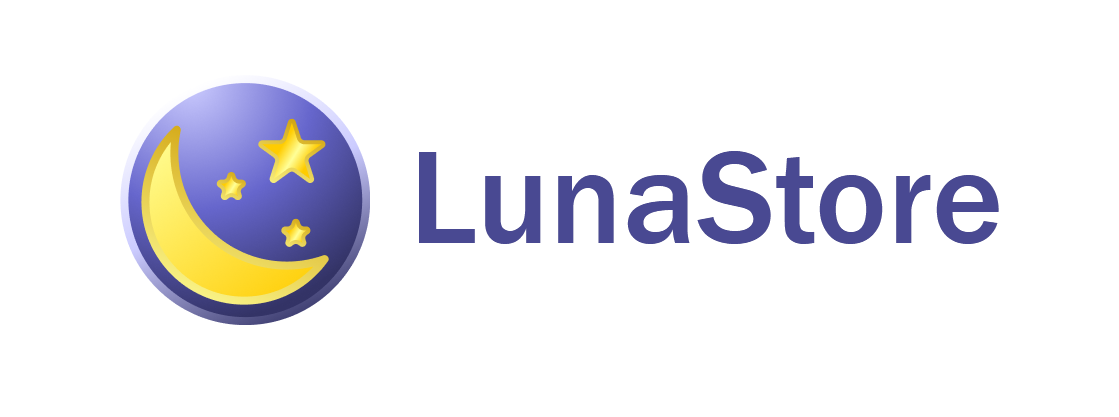
<style>
.page{position:relative;width:1119px;height:417px;background:#ffffff}
.page>*{position:absolute;margin:0}
.t1{font:136px "FranklinGothic-Medium";color:#494992}
</style>
<div class="page">
<p class="t1" style="left:419px;top:151px;width:580px;height:93px">LunaStore</p>
</div>
